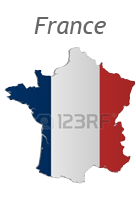
<style>
.page{position:relative;width:136px;height:200px;background:#ffffff}
.page>*{position:absolute;margin:0}
.t1{font:24px "TrebuchetMS-Italic";color:#666666}
</style>
<div class="page">
<p class="t1" style="left:34px;top:17px;width:72px;height:17px">France</p>
</div>
